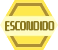
<style>
.page{position:relative;width:58px;height:50px;background:#ffffff}
.page>*{position:absolute;margin:0}
.t1{font:11.2px "AokaneStd-EB";letter-spacing:-0.03em;color:#8a781f;font-weight:bold;scale:0.72 1}
</style>
<div class="page">
<p class="t1" style="left:5px;top:21px;width:50px;height:11px">ESCONDIDO</p>
</div>
